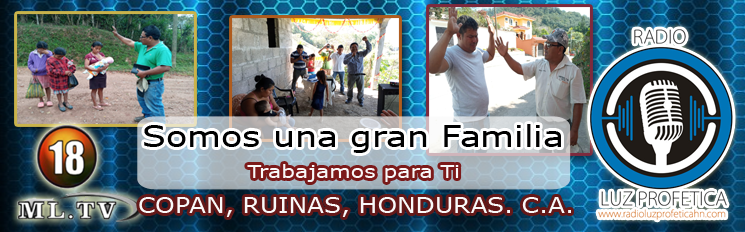
<style>
.page{position:relative;width:745px;height:232px}
.page>*{position:absolute;margin:0}
.t1{font:29.2px "Verdana";color:#000000;scale:1.19 1}
.t2{font:18.5px "Verdana";color:#f9f9f9;scale:1.19 1}
.t3{font:20.8px "Verdana";color:#f9f9f9;scale:1.19 1}
</style>
<div class="page">
<p class="t1" style="left:144px;top:124px;width:417px;height:29px">Somos una gran Familia</p>
<p class="t2" style="left:247px;top:164px;width:212px;height:18px">Trabajamos para Ti</p>
<p class="t3" style="left:139px;top:197px;width:432px;height:20px">COPAN, RUINAS, HONDURAS. C.A.</p>
</div>
